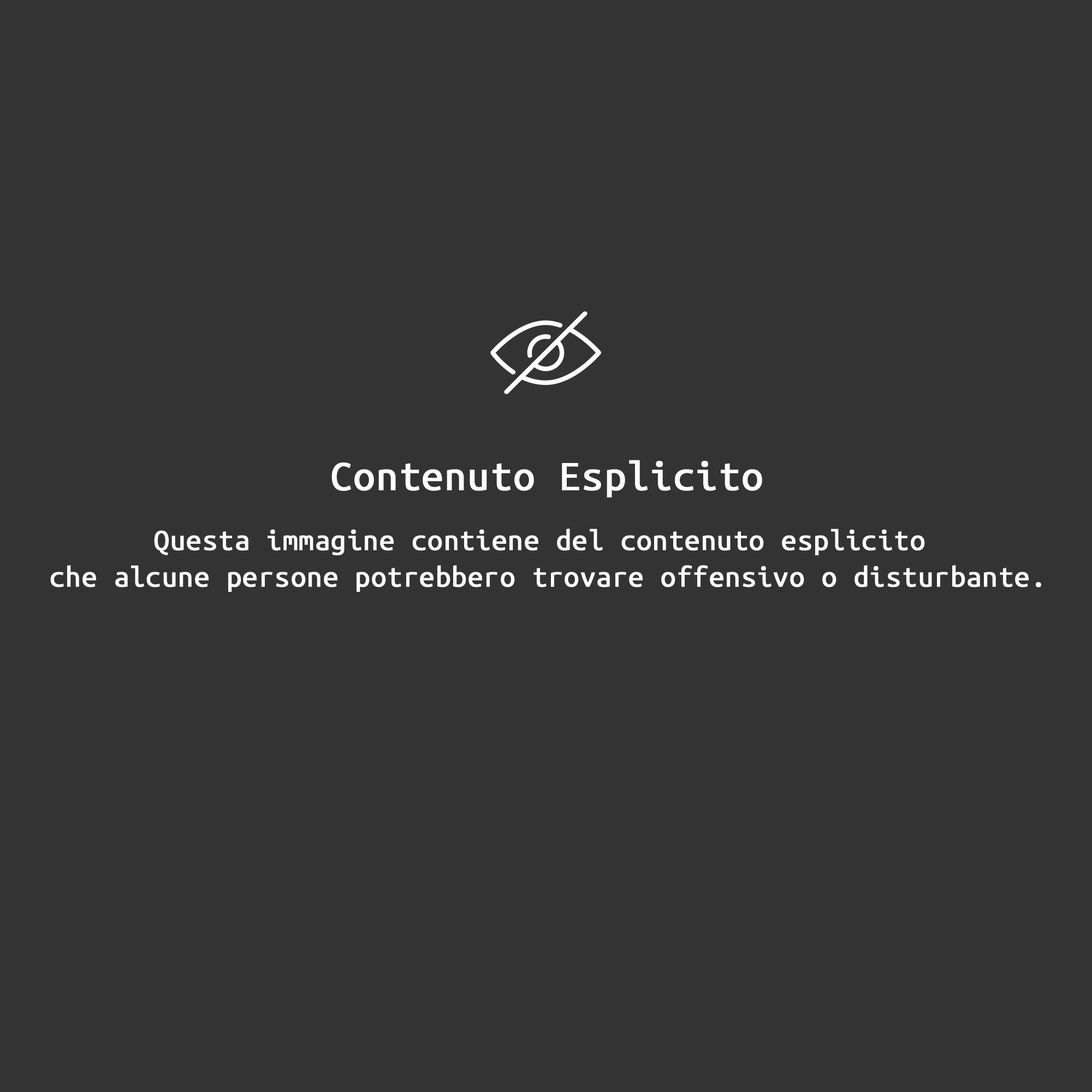
<style>
.page{position:relative;width:1092px;height:1092px;background:#333333}
.page>*{position:absolute;margin:0}
.t1{font:43.1px "UbuntuMono-Regular";color:#ffffff;font-weight:bold}
.t2{font:30.4px "UbuntuMono-Regular";color:#ffffff;font-weight:bold}
</style>
<div class="page">
<p class="t1" style="left:331px;top:460px;width:431px;height:37px">Contenuto Esplicito</p>
<p class="t2" style="left:50px;top:529px;width:991px;height:63px;text-align:center">Questa immagine contiene del contenuto esplicito <br>che alcune persone potrebbero trovare offensivo o disturbante.</p>
</div>
